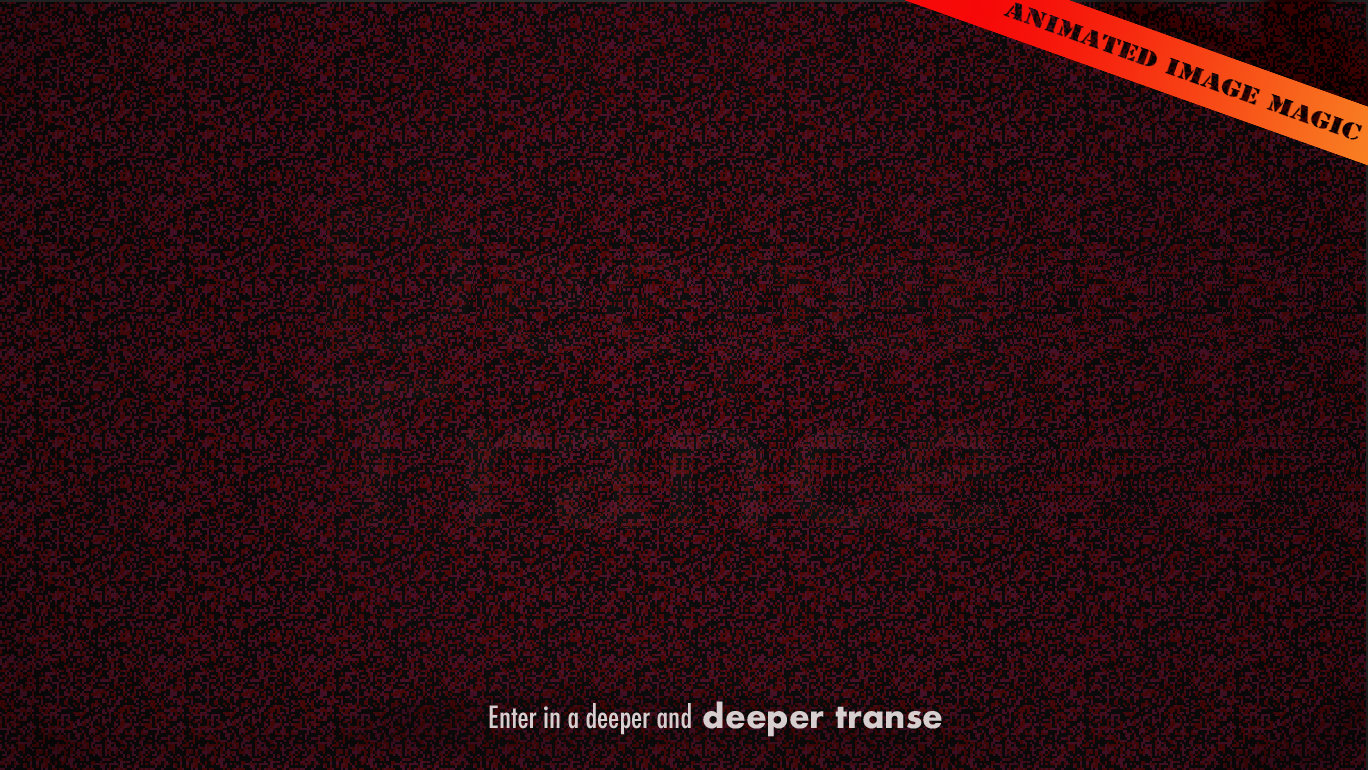
<style>
.page{position:relative;width:1368px;height:770px}
.page>*{position:absolute;margin:0}
.t1{font:30px "Futura-CondensedMedium";color:#d7cfcf}
.t2{font:32px "Futura-Bold";color:#d7cfcf}
</style>
<div class="page">
<p class="t1" style="left:489px;top:701px;width:453px;height:36px">Enter in a deeper and <span class="t2">deeper transe</span></p>
</div>
